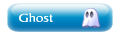
<style>
.page{position:relative;width:120px;height:35px;background:#ffffff}
.page>*{position:absolute;margin:0}
.t1{font:12px "BakerSignet";color:#ffffff;scale:1.28 1}
</style>
<div class="page">
<p class="t1" style="left:19px;top:13px;width:34px;height:9px">Ghost</p>
</div>
